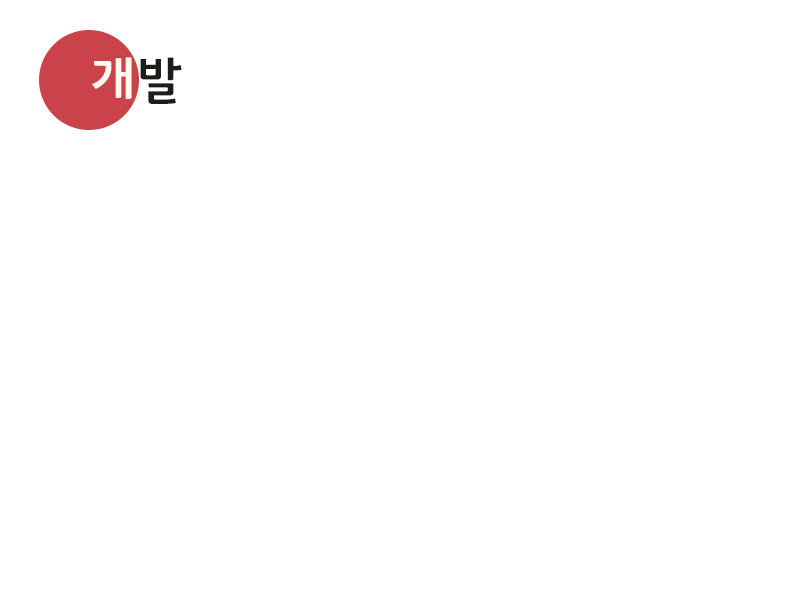
<style>
.page{position:relative;width:800px;height:600px;background:#ffffff}
.page>*{position:absolute;margin:0}
.t1{font:48px "BinggraeTaom-Bold";letter-spacing:0.05em;color:#fff8ee}
.t2{font:48px "BinggraeTaom-Bold";letter-spacing:0.05em;color:#1e1b19}
</style>
<div class="page">
<p class="t1" style="left:92px;top:57px;width:90px;height:47px">개<span class="t2">발</span></p>
</div>
